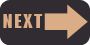
<style>
.page{position:relative;width:90px;height:45px;background:#312c32}
.page>*{position:absolute;margin:0}
.t1{font:18px "Impact";letter-spacing:0.1em;color:#daad86}
</style>
<div class="page">
<p class="t1" style="left:3px;top:14px;width:40px;height:14px">NEXT</p>
</div>
